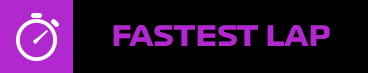
<style>
.page{position:relative;width:368px;height:73px;background:#000000}
.page>*{position:absolute;margin:0}
.t1{font:27.7px "Formula1-Display-Bold";color:#b129ce}
</style>
<div class="page">
<p class="t1" style="left:113px;top:24px;width:217px;height:22px">FASTEST LAP</p>
</div>
